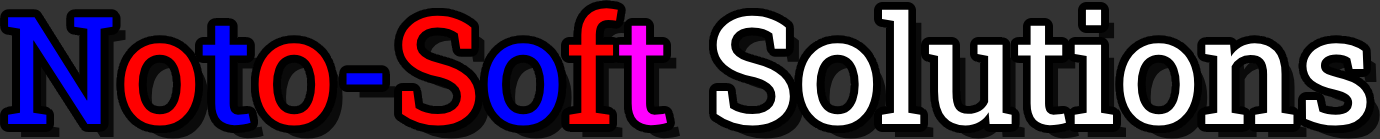
<style>
.page{position:relative;width:1380px;height:139px;background:#333333}
.page>*{position:absolute;margin:0}
.t1{font:150px "RobotoSlab-Regular";color:#ffffff}
.t2{font:150px "RobotoSlab-Regular";color:#0000ff}
.t3{font:150px "RobotoSlab-Regular";color:#ff0000}
.t4{font:150px "RobotoSlab-Regular";color:#ff00ff}
</style>
<div class="page">
<p class="t1" style="left:8px;top:8px;width:1359px;height:118px"><span class="t2">N</span><span class="t3">o</span><span class="t2">t</span><span class="t3">o</span><span class="t2">-</span><span class="t3">S</span><span class="t2">o</span><span class="t3">f</span><span class="t4">t </span>Solutions</p>
</div>
